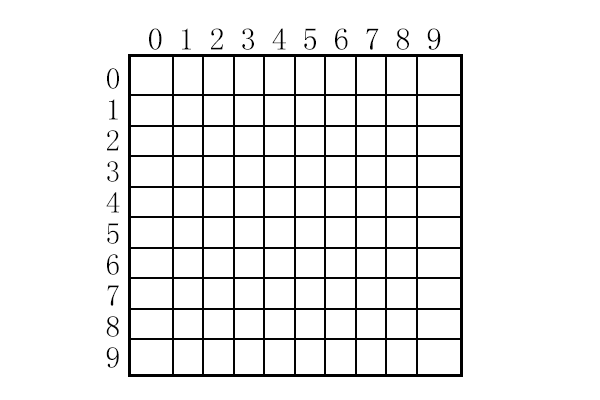
<style>
.page{position:relative;width:600px;height:400px;background:#ffffff}
.page>*{position:absolute;margin:0}
.t1{font:31px "SimSun";color:#000000}
.t2{font:30px/31px "SimSun";color:#000000}
</style>
<div class="page">
<p class="t1" style="left:149px;top:28px;width:292px;height:22px">0 1 2 3 4 5 6 7 8 9</p>
<p class="t2" style="left:106px;top:68px;width:14px;height:300px">0<br>1<br>2<br>3<br>4<br>5<br>6<br>7<br>8<br>9</p>
</div>
